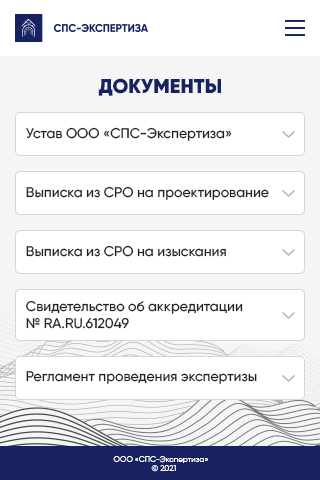
<style>
.page{position:relative;width:320px;height:480px;background:#ffffff}
.page>*{position:absolute;margin:0}
.t1{font:20px "Gilroy-Black";color:#182263}
.t2{font:14px "Gilroy-Medium";color:#212121}
.t3{font:8px "Gilroy-Regular";color:#ffffff}
</style>
<div class="page">
<p class="t1" style="left:98px;top:78px;width:123px;height:18px">ДОКУМЕНТЫ</p>
<p class="t2" style="left:26px;top:127px;width:206px;height:14px">Устав ООО «СПС-Экспертиза»</p>
<p class="t2" style="left:26px;top:186px;width:243px;height:14px">Выписка из СРО на проектирование</p>
<p class="t2" style="left:26px;top:245px;width:200px;height:12px">Выписка из СРО на изыскания</p>
<p class="t2" style="left:26px;top:300px;width:217px;height:29px">Свидетельство об аккредитации <br>№ RA.RU.612049</p>
<p class="t2" style="left:26px;top:371px;width:231px;height:13px">Регламент проведения экспертизы</p>
<p class="t3" style="left:113px;top:456px;width:95px;height:16px;text-align:center">ООО «СПС-Экспертиза»   <br>© 2021</p>
</div>
